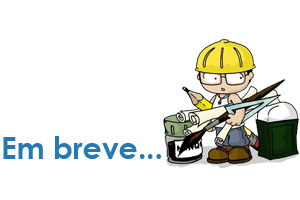
<style>
.page{position:relative;width:300px;height:200px;background:#ffffff}
.page>*{position:absolute;margin:0}
.t1{font:30px "CenturyGothic-Bold";color:#2579b4}
</style>
<div class="page">
<p class="t1" style="left:3px;top:136px;width:158px;height:23px">Em breve...</p>
</div>
